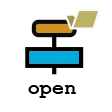
<style>
.page{position:relative;width:112px;height:112px;background:#ffffff}
.page>*{position:absolute;margin:0}
.t1{font:20.3px "CourierNewPS-BoldMT";color:#000000}
</style>
<div class="page">
<p class="t1" style="left:28px;top:85px;width:48px;height:13px">open</p>
</div>
